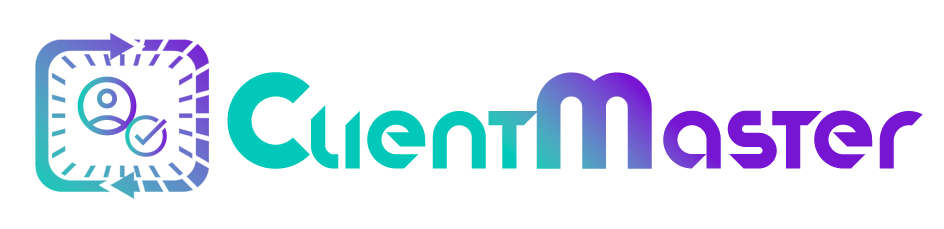
<style>
.page{position:relative;width:944px;height:229px;background:#ffffff}
.page>*{position:absolute;margin:0}
.t1{font:72px "Stereofunk";letter-spacing:0.075em}
.t2{font:120px "Stereofunk";letter-spacing:0.075em}
</style>
<div class="page">
<p class="t1" style="left:227px;top:72px;width:696px;height:97px"><span class="t2">C</span>lient<span class="t2">M</span>aster</p>
</div>
